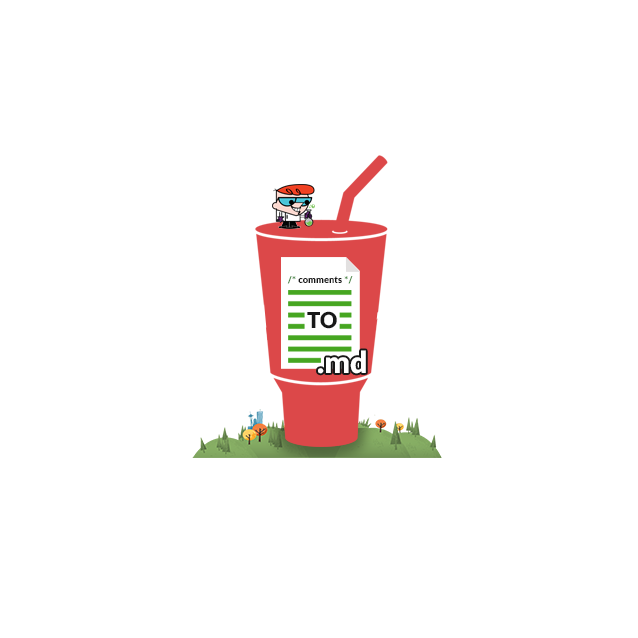
<style>
.page{position:relative;width:638px;height:638px;background:#ffffff}
.page>*{position:absolute;margin:0}
.t1{font:9.4px "Lato-Black";color:#181818}
.t2{font:9.4px "Lato-Black";color:#458541}
.t3{font:21.7px "Lato-Black";color:#181818}
.t4{font:30px "Lato-Black";color:#ffffff}
</style>
<div class="page">
<p class="t1" style="left:287px;top:276px;width:66px;height:8px"><span class="t2">/* </span>comments <span class="t2">*/</span></p>
<p class="t3" style="left:307px;top:311px;width:30px;height:18px">TO</p>
<p class="t4" style="left:318px;top:350px;width:48px;height:24px">.md</p>
</div>
